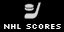
<style>
.page{position:relative;width:64px;height:32px;background:#000000}
.page>*{position:absolute;margin:0}
.t1{font:8.1px "Silkscreen-Regular";color:#ffffff}
</style>
<div class="page">
<p class="t1" style="left:4px;top:24px;width:57px;height:5px">nhl Scores</p>
</div>
